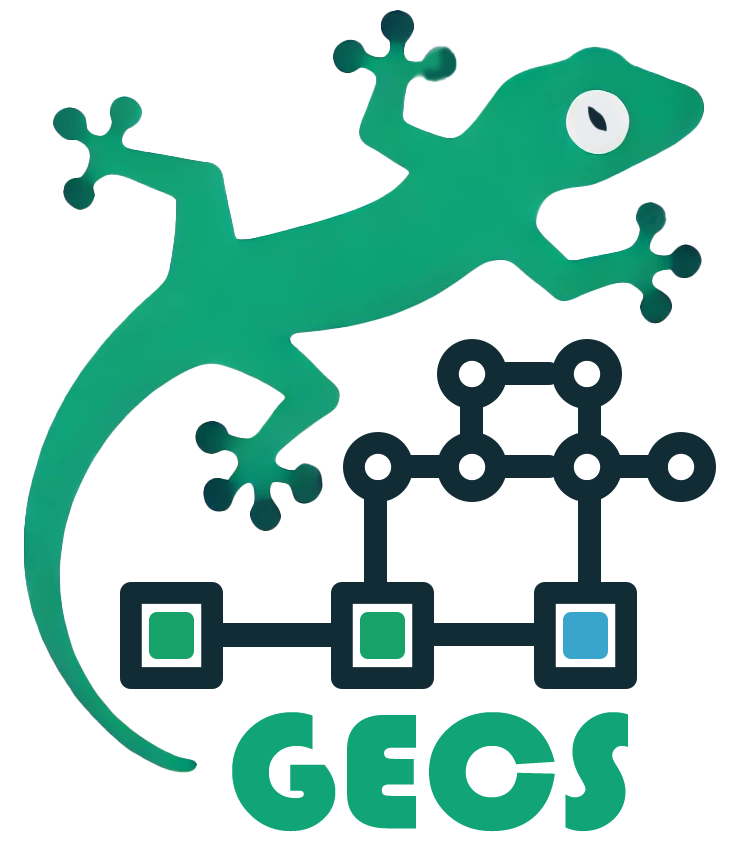
<style>
.page{position:relative;width:745px;height:845px;background:#ffffff}
.page>*{position:absolute;margin:0}
.t1{font:169.7px "Bauhaus93";color:#10a476;scale:1.06 1}
</style>
<div class="page">
<p class="t1" style="left:232px;top:712px;width:396px;height:120px">GECS</p>
</div>
